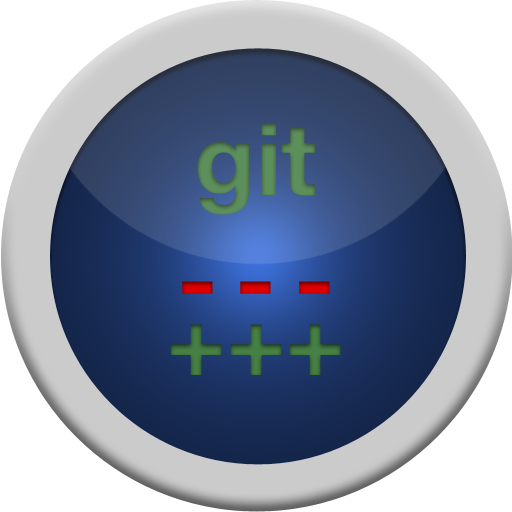
<style>
.page{position:relative;width:512px;height:512px;background:#ffffff}
.page>*{position:absolute;margin:0}
.t1{font:100px "HelveticaNeue-Bold";letter-spacing:-0.05em;color:#de0000}
.t2{font:100px "HelveticaNeue-Bold";color:#468044}
.t3{font:100px/60px "HelveticaNeue-Bold";color:#468044}
</style>
<div class="page">
<p class="t1" style="left:170px;top:123px;width:171px;height:252px;text-align:center"><span class="t2">git<br></span>- - -<br><span class="t3">+++</span></p>
</div>
